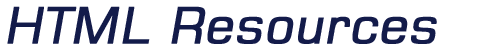
<style>
.page{position:relative;width:500px;height:50px;background:#ffffff}
.page>*{position:absolute;margin:0}
.t1{font:49.8px "Square721BT-Roman";color:#131b4a;font-weight:bold;font-style:italic}
</style>
<div class="page">
<p class="t1" style="left:7px;top:6px;width:430px;height:38px">HTML Resources</p>
</div>
